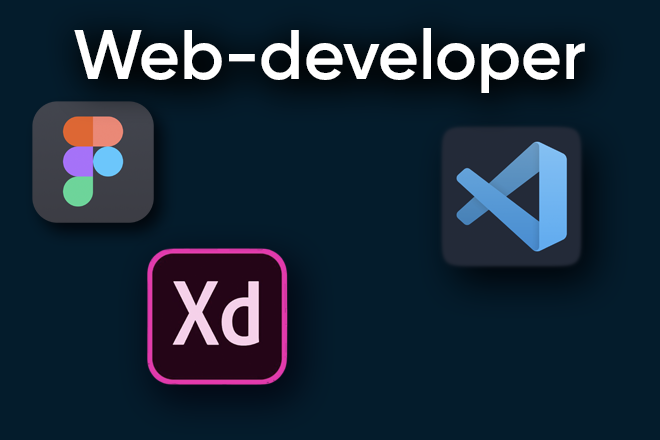
<style>
.page{position:relative;width:660px;height:440px;background:#041c2c}
.page>*{position:absolute;margin:0}
.t1{font:70px "Gilroy-SemiBold";color:#ffffff}
</style>
<div class="page">
<p class="t1" style="left:74px;top:28px;width:511px;height:65px">Web-developer</p>
</div>
